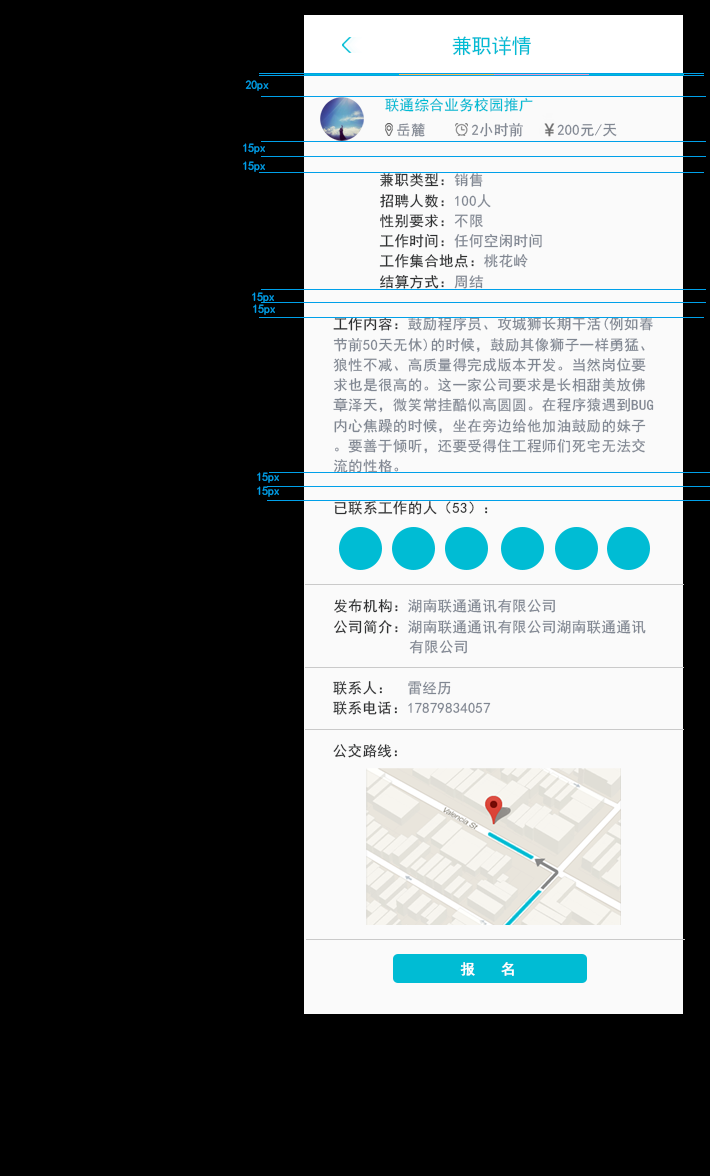
<style>
.page{position:relative;width:710px;height:1176px;background:#000000}
.page>*{position:absolute;margin:0}
.t1{font:20.2px "SimHei";letter-spacing:-0.02em;color:#00bcd4}
.t2{font:12px "SimHei";letter-spacing:-0.02em;color:#00a0e9}
.t3{font:14.6px "SimHei";letter-spacing:0.02em;color:#00bcd4}
.t4{font:14.6px "SimHei";letter-spacing:0.02em;color:#808792}
.t5{font:14.6px/20.2px "SimHei";letter-spacing:0.02em;color:#2e3031}
.t6{font:14.6px/20.2px "SimHei";letter-spacing:0.02em;color:#808792}
.t7{font:14.6px "SimHei";letter-spacing:0.02em;color:#2e3031}
.t8{font:14.6px "SimHei";letter-spacing:0.02em;color:#ffffff;font-weight:bold}
</style>
<div class="page">
<p class="t1" style="left:452px;top:36px;width:79px;height:20px">兼职详情</p>
<p class="t2" style="left:245px;top:80px;width:24px;height:11px">20px</p>
<p class="t3" style="left:385px;top:97px;width:148px;height:15px">联通综合业务校园推广</p>
<p class="t4" style="left:397px;top:123px;width:28px;height:14px">岳麓</p>
<p class="t4" style="left:471px;top:123px;width:52px;height:14px">2小时前</p>
<p class="t4" style="left:557px;top:123px;width:60px;height:14px">200元/天</p>
<p class="t2" style="left:243px;top:143px;width:22px;height:11px">15px</p>
<p class="t2" style="left:243px;top:161px;width:22px;height:11px">15px</p>
<p class="t5" style="left:379px;top:173px;width:163px;height:116px">兼职类型：<span class="t6">销售<br></span>招聘人数：<span class="t6">100人<br></span>性别要求：<span class="t6">不限<br></span>工作时间：<span class="t6">任何空闲时间<br></span>工作集合地点：<span class="t6">桃花岭<br></span>结算方式：<span class="t6">周结</span></p>
<p class="t2" style="left:252px;top:292px;width:22px;height:11px">15px</p>
<p class="t2" style="left:253px;top:304px;width:22px;height:11px">15px</p>
<p class="t6" style="left:333px;top:316px;width:321px;height:157px"><span class="t5">工作内容：</span>鼓励程序员、攻城狮长期干活(例如春节前50天无休)的时候，鼓励其像狮子一样勇猛、狼性不减、高质量得完成版本开发。当然岗位要求也是很高的。这一家公司要求是长相甜美放佛章泽天，微笑常挂酷似高圆圆。在程序猿遇到BUG内心焦躁的时候，坐在旁边给他加油鼓励的妹子。要善于倾听，还要受得住工程师们死宅无法交流的性格。</p>
<p class="t2" style="left:257px;top:472px;width:22px;height:11px">15px</p>
<p class="t2" style="left:257px;top:486px;width:22px;height:11px">15px</p>
<p class="t7" style="left:334px;top:501px;width:154px;height:14px">已联系工作的人（53）：</p>
<p class="t6" style="left:334px;top:598px;width:312px;height:56px"><span class="t5">发布机构：</span>湖南联通通讯有限公司<br><span class="t5">公司简介：</span>湖南联通通讯有限公司湖南联通通讯          有限公司</p>
<p class="t6" style="left:333px;top:681px;width:158px;height:34px"><span class="t5">联系人：  </span>雷经历<br><span class="t5">联系电话：</span>17879834057</p>
<p class="t7" style="left:333px;top:743px;width:64px;height:15px">公交路线：</p>
<p class="t8" style="left:460px;top:962px;width:54px;height:14px">报  名</p>
</div>
